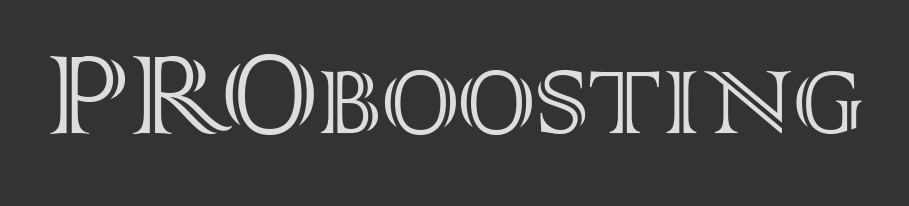
<style>
.page{position:relative;width:909px;height:206px;background:#333333}
.page>*{position:absolute;margin:0}
.t1{font:118.7px "ColonnaMT";color:#dddddd}
.t2{font:148px "ColonnaMT";color:#dddddd}
</style>
<div class="page">
<p class="t1" style="left:50px;top:54px;width:812px;height:81px"><span class="t2">PRO</span>BOOSTING</p>
</div>
